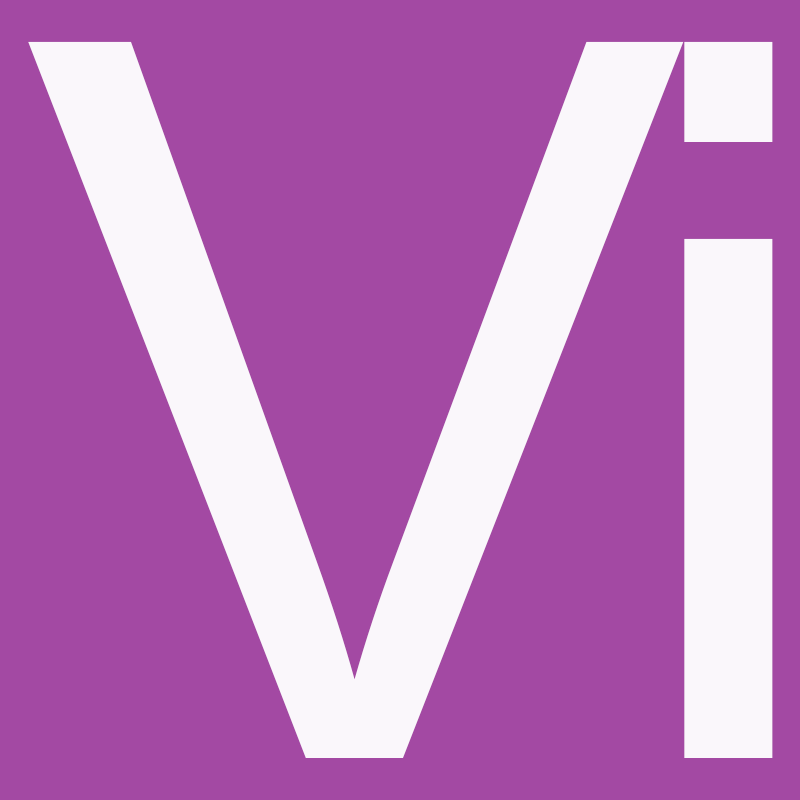
<style>
.page{position:relative;width:800px;height:800px;background:#a349a3}
.page>*{position:absolute;margin:0}
.t1{font:1000px "ArialMT";color:#fbf7fb}
</style>
<div class="page">
<p class="t1" style="left:28px;top:41px;width:656px;height:717px">V</p>
<p class="t1" style="left:684px;top:41px;width:89px;height:717px">i</p>
</div>
